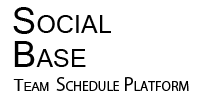
<style>
.page{position:relative;width:200px;height:100px;background:#ffffff}
.page>*{position:absolute;margin:0}
.t1{font:39px/34px "Shruti";color:#000000;font-variant:small-caps}
.t2{font:18px "KozGoPr6N-Regular";color:#000000;font-variant:small-caps}
.t3{font:18px "Shruti";color:#000000;font-variant:small-caps}
</style>
<div class="page">
<p class="t1" style="left:13px;top:7px;width:98px;height:60px">Social<br>Base</p>
<p class="t2" style="left:13px;top:77px;width:176px;height:14px"><span class="t3">Team </span>Schedule Platform</p>
</div>
